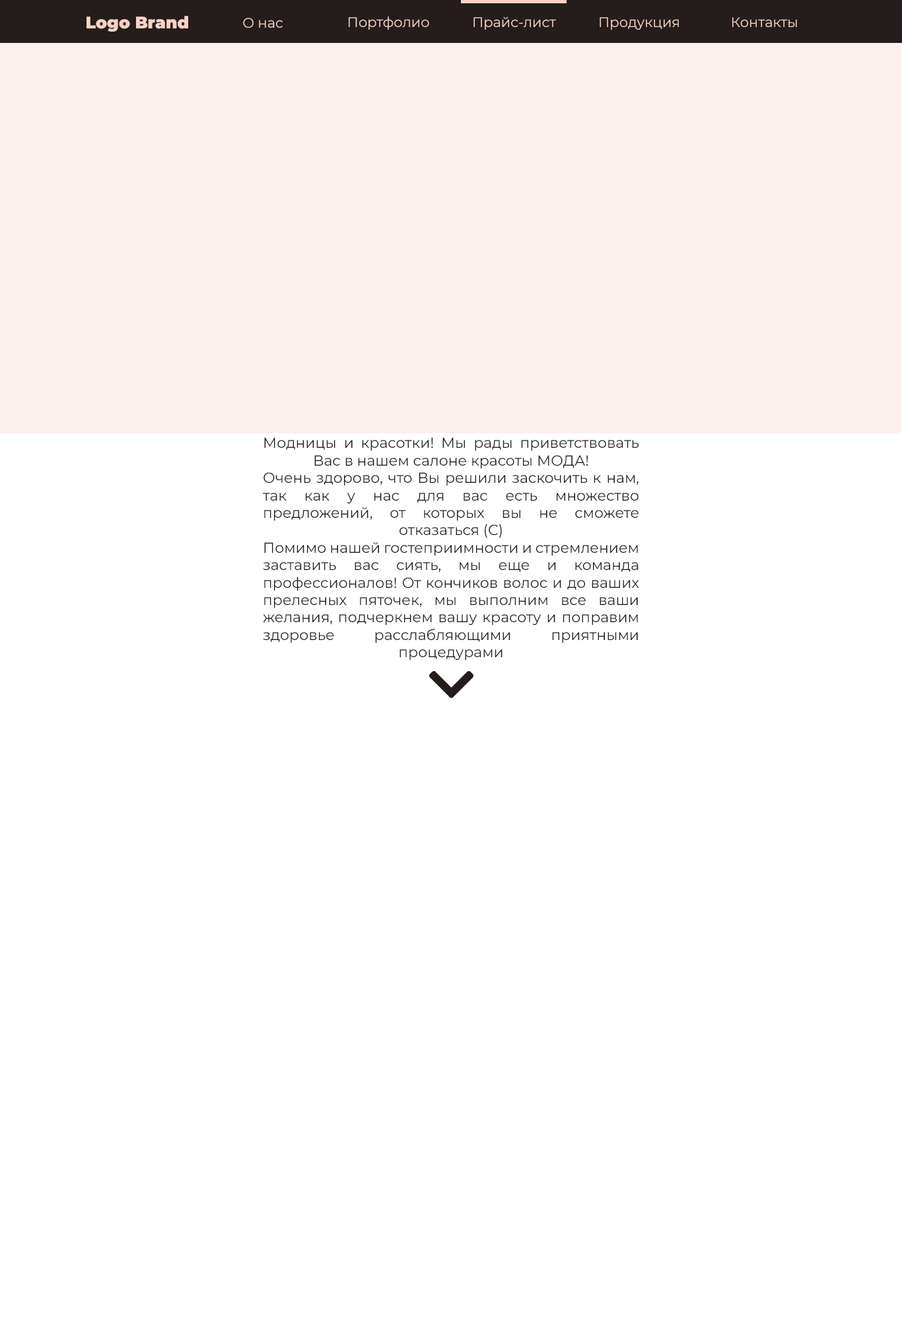
<style>
.page{position:relative;width:902px;height:1321px;background:#ffffff}
.page>*{position:absolute;margin:0}
.t1{font:16.5px "Montserrat-Black";color:#f9d2c5}
.t2{font:13.9px "Montserrat-Regular";color:#f9d2c5}
.t3{font:14.5px "Montserrat-Regular";color:#241d1b}
.t4{font:14.5px "Montserrat-Medium";color:#241d1b}
</style>
<div class="page">
<p class="t1" style="left:87px;top:16px;width:101px;height:16px">Logo Brand</p>
<p class="t2" style="left:243px;top:18px;width:40px;height:10px">О нас</p>
<p class="t2" style="left:349px;top:17px;width:80px;height:13px">Портфолио</p>
<p class="t2" style="left:474px;top:17px;width:82px;height:13px">Прайс-лист</p>
<p class="t2" style="left:600px;top:17px;width:79px;height:13px">Продукция</p>
<p class="t2" style="left:733px;top:17px;width:64px;height:10px">Контакты</p>
<p class="t3" style="left:263px;top:437px;width:377px;height:224px;text-align:justify">Модницы и красотки! Мы рады приветствовать Вас в нашем салоне красоты МОДА!<br>Очень здорово, что Вы решили заскочить к нам, так как у нас для вас есть множество предложений, от которых вы не сможете отказаться (С)<br>Помимо нашей гостеприимности и стремлением заставить вас сиять, мы еще и команда профессионалов! От кончиков волос и до ваших прелесных пяточек, мы выполним все ваши желания, подчеркнем вашу красоту и поправим здоровье расслабляющими приятными процедурами<br><br>Е. Чавдар, 12<br>(ст. м. Осокорки 5-7 мин.)<br><span class="t4">пн.-вс.: с 9:00 до 22:00</span></p>
</div>
